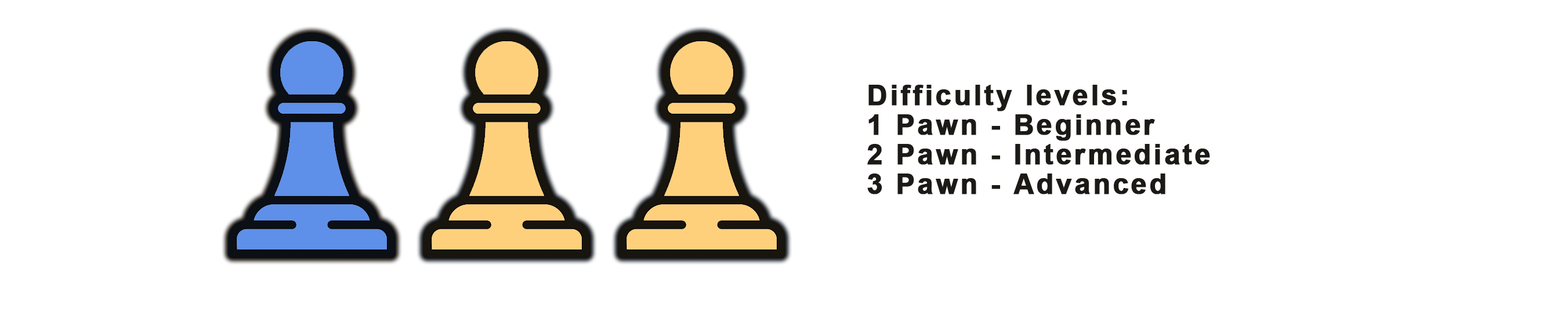
<style>
.page{position:relative;width:1568px;height:318px;background:#ffffff}
.page>*{position:absolute;margin:0}
.t1{font:27.8px/29.5px "Arial-BoldMT";letter-spacing:0.075em;color:#1c1a16;font-weight:bold}
</style>
<div class="page">
<p class="t1" style="left:867px;top:85px;width:343px;height:109px">Difficulty levels:<br>1 Pawn - Beginner <br>2 Pawn - Intermediate<br>3 Pawn - Advanced</p>
</div>
